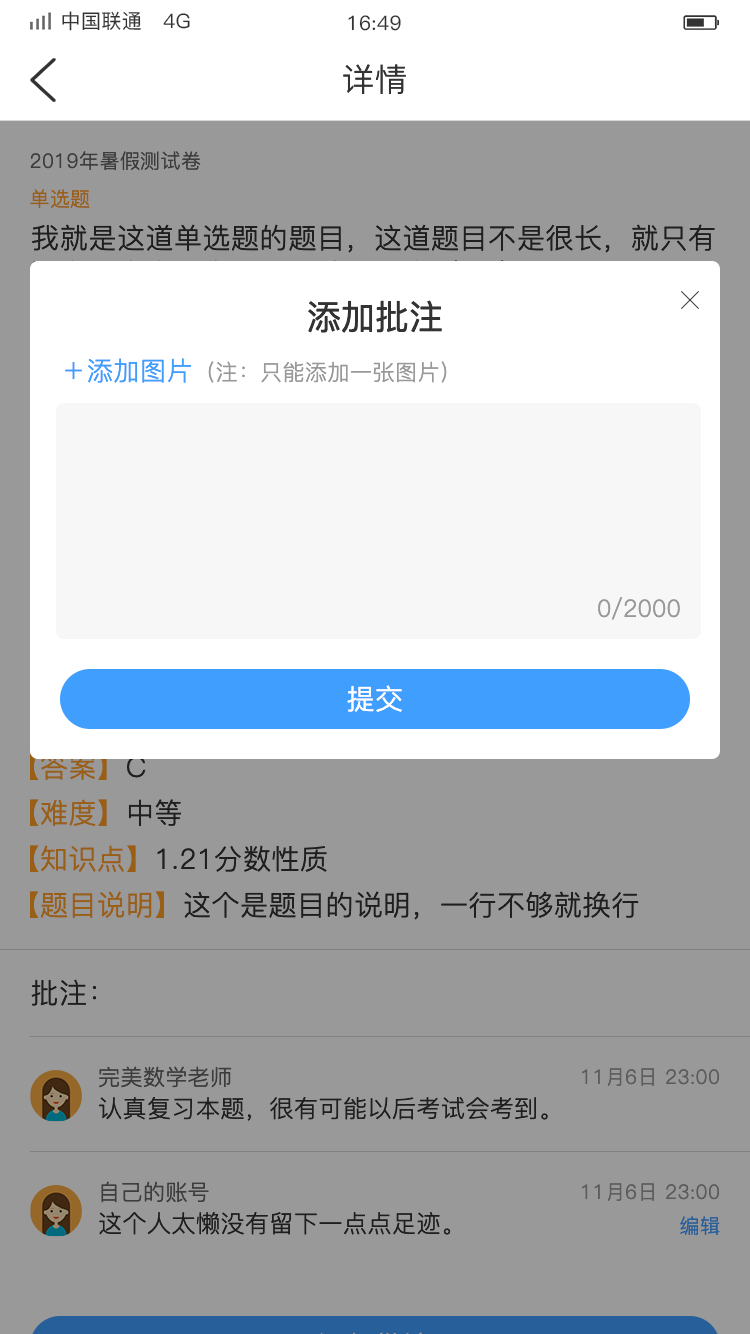
<style>
.page{position:relative;width:750px;height:1334px;background:#999999}
.page>*{position:absolute;margin:0}
.t1{font:20px "PingFang-SC-Medium";letter-spacing:0.02em;color:#333333}
.t2{font:32px "PingFang-SC-Regular";letter-spacing:0.02em;color:#333333}
.t3{font:20px "PingFang-SC-Regular";letter-spacing:0.02em;color:#3d3d3d}
.t4{font:20px "PingFang-SC-Regular";letter-spacing:0.02em;color:#995f14}
.t5{font:28px/36px "PingFang-SC-Regular";letter-spacing:0.02em;color:#333333}
.t6{font:34px "PingFang-SC-Medium";color:#333333}
.t7{font:22px "PingFang-SC-Regular";letter-spacing:0.02em;color:#999999}
.t8{font:26px "PingFang-SC-Regular";letter-spacing:0.02em;color:#409eff}
.t9{font:24px "PingFang-SC-Regular";color:#999999}
.t10{font:28px "PingFang-SC-Regular";letter-spacing:0.02em;color:#ffffff}
.t11{font:28px "PingFang-SC-Regular";letter-spacing:0.02em}
.t12{font:28px "PingFang-SC-Regular";letter-spacing:0.02em;color:#333333}
.t13{font:28px "PingFang-SC-Regular";letter-spacing:0.02em;color:#ff9e21}
.t14{font:22px "PingFang-SC-Regular";letter-spacing:0.02em;color:#3d3d3d}
.t15{font:20px "PingFang-SC-Regular";letter-spacing:0.02em;color:#5c5c5c}
.t16{font:24px "PingFang-SC-Regular";letter-spacing:0.02em;color:#333333}
.t17{font:20px "PingFang-SC-Regular";letter-spacing:0.02em;color:#265f99}
</style>
<div class="page">
<p class="t1" style="left:62px;top:11px;width:128px;height:20px">中国联通   4G</p>
<p class="t1" style="left:348px;top:15px;width:53px;height:16px">16:49</p>
<p class="t2" style="left:343px;top:64px;width:63px;height:31px">详情</p>
<p class="t3" style="left:30px;top:151px;width:171px;height:20px">2019年暑假测试卷</p>
<p class="t4" style="left:30px;top:189px;width:60px;height:19px">单选题</p>
<p class="t5" style="left:32px;top:224px;width:683px;height:65px">我就是这道单选题的题目，这道题目不是很长，就只有这么一点点，你看看想选哪一个（    ）</p>
<p class="t6" style="left:308px;top:300px;width:134px;height:33px">添加批注</p>
<p class="t7" style="left:65px;top:358px;width:382px;height:25px"><span class="t8">＋添加图片</span>（注：只能添加一张图片）</p>
<p class="t9" style="left:598px;top:597px;width:82px;height:23px">0/2000</p>
<p class="t10" style="left:347px;top:685px;width:55px;height:27px">提交</p>
<p class="t11" style="left:30px;top:753px;width:116px;height:27px">【答案】C</p>
<p class="t11" style="left:30px;top:799px;width:151px;height:27px">【难度】中等</p>
<p class="t11" style="left:30px;top:845px;width:297px;height:27px">【知识点】1.21分数性质</p>
<p class="t12" style="left:30px;top:891px;width:609px;height:29px"><span class="t13">【题目说明】</span>这个是题目的说明，一行不够就换行</p>
<p class="t12" style="left:31px;top:979px;width:66px;height:27px">批注：</p>
<p class="t14" style="left:99px;top:1066px;width:133px;height:22px">完美数学老师</p>
<p class="t15" style="left:582px;top:1068px;width:137px;height:18px">11月6日 23:00</p>
<p class="t16" style="left:99px;top:1097px;width:449px;height:24px">认真复习本题，很有可能以后考试会考到。</p>
<p class="t14" style="left:101px;top:1181px;width:108px;height:22px">自己的账号</p>
<p class="t15" style="left:582px;top:1183px;width:137px;height:18px">11月6日 23:00</p>
<p class="t16" style="left:99px;top:1212px;width:352px;height:23px">这个人太懒没有留下一点点足迹。</p>
<p class="t17" style="left:680px;top:1216px;width:40px;height:19px">编辑</p>
</div>
